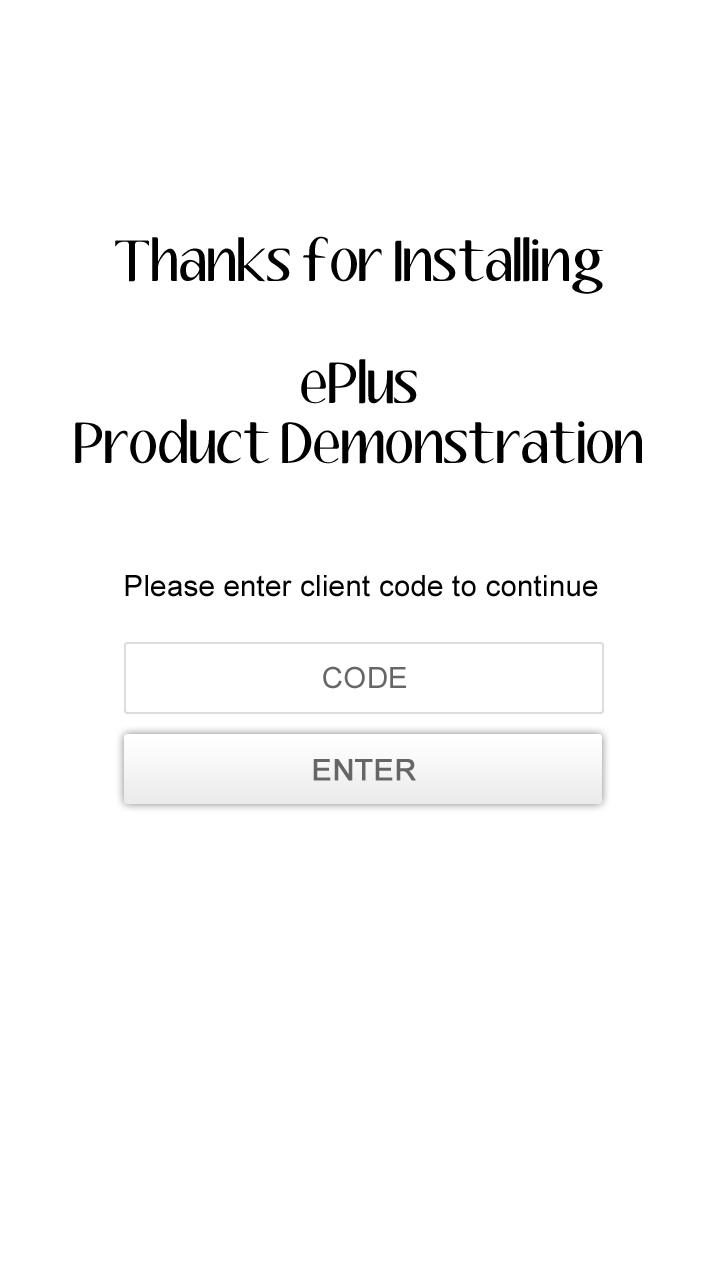
<style>
.page{position:relative;width:720px;height:1280px;background:#ffffff}
.page>*{position:absolute;margin:0}
.t1{font:50.7px "Aubrey";letter-spacing:0.01em;color:#000000}
.t2{font:29.3px "ArialMT";letter-spacing:0.01em;color:#000000}
.t3{font:29.3px "ArialMT";letter-spacing:0.01em;color:#666666}
.t4{font:29.3px "ArialMT";letter-spacing:0.01em;color:#666666;font-weight:bold}
</style>
<div class="page">
<p class="t1" style="left:75px;top:236px;width:567px;height:228px;text-align:center">Thanks for Installing<br><br>ePlus<br>Product Demonstration</p>
<p class="t2" style="left:125px;top:575px;width:473px;height:22px">Please enter client code to continue</p>
<p class="t3" style="left:323px;top:666px;width:83px;height:23px">CODE</p>
<p class="t4" style="left:313px;top:759px;width:103px;height:22px">ENTER</p>
</div>
